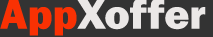
<style>
.page{position:relative;width:213px;height:37px;background:#333333}
.page>*{position:absolute;margin:0}
.t1{font:42.9px "FranklinGothic-Heavy";color:#ebe8e7}
.t2{font:42.9px "FranklinGothic-Heavy";color:#f93103}
</style>
<div class="page">
<p class="t1" style="left:0px;top:0px;width:206px;height:36px"><span class="t2">App</span>Xoffer</p>
</div>
